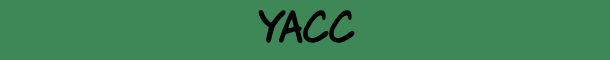
<style>
.page{position:relative;width:610px;height:60px;background:#3e8756}
.page>*{position:absolute;margin:0}
.t1{font:41px "KomikaHand";color:#000000}
</style>
<div class="page">
<p class="t1" style="left:258px;top:9px;width:97px;height:34px">YACC</p>
</div>
